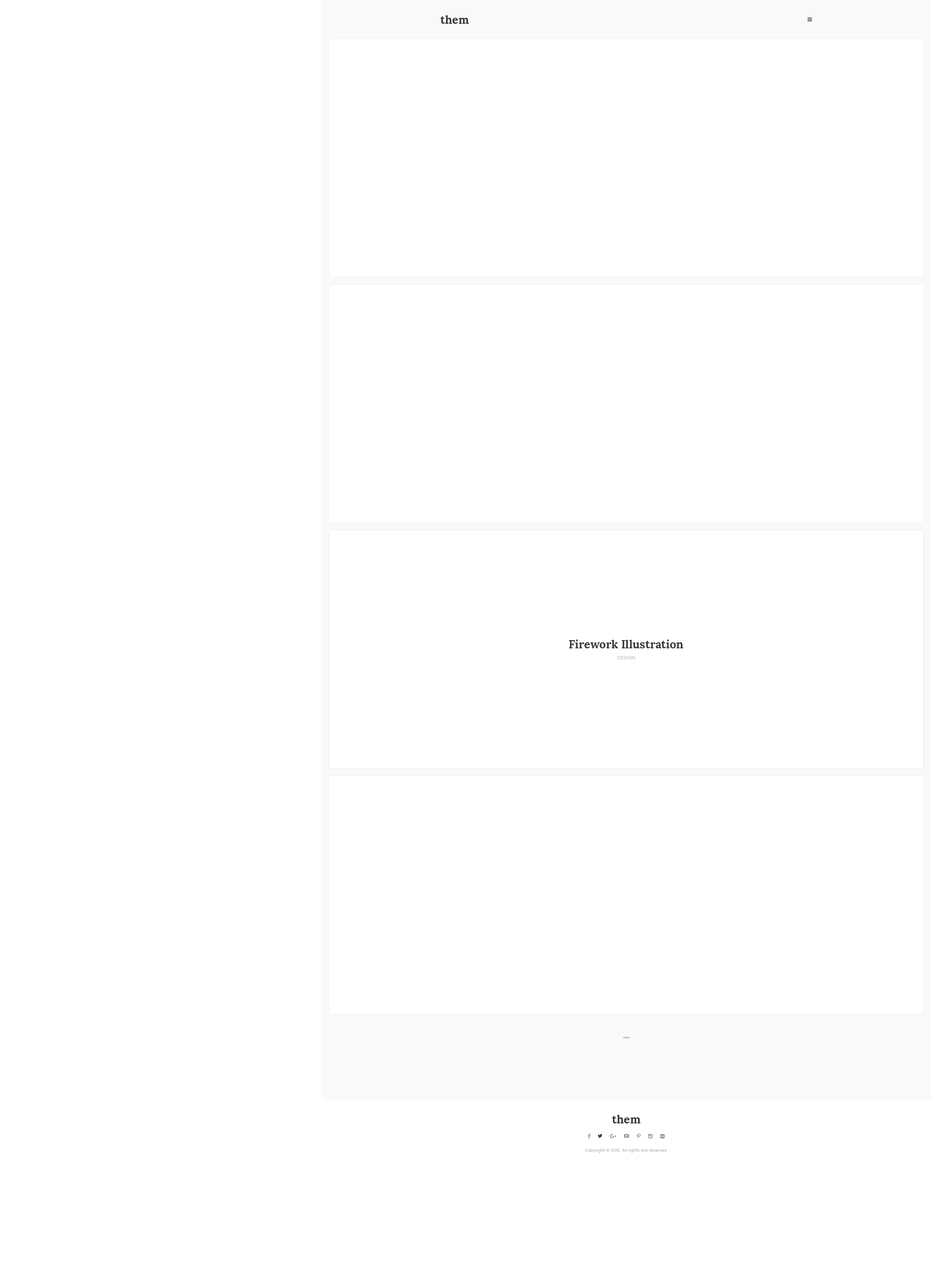
<style>
.page{position:relative;width:934px;height:1277px;background:#ffffff}
.page>*{position:absolute;margin:0}
.t1{font:11.4px "Lora-Bold";color:#393939}
.t2{font:5.1px "Poppins-Light";letter-spacing:0.01em;color:#bcaaa4;text-transform:uppercase}
.t3{font:3.8px "Poppins-Light";letter-spacing:0.05em;color:#999999}
.t4{font:3.8px "OpenSans";letter-spacing:0.05em;color:#999999}
</style>
<div class="page">
<p class="t1" style="left:440px;top:15px;width:29px;height:9px">them</p>
<p class="t1" style="left:569px;top:639px;width:114px;height:9px">Firework Illustration</p>
<p class="t2" style="left:617px;top:656px;width:18px;height:3px">Design</p>
<p class="t1" style="left:612px;top:1115px;width:29px;height:8px">them</p>
<p class="t3" style="left:585px;top:1148px;width:83px;height:4px">Copyright <span class="t4">© </span>2016. All rights are reserved.</p>
</div>
